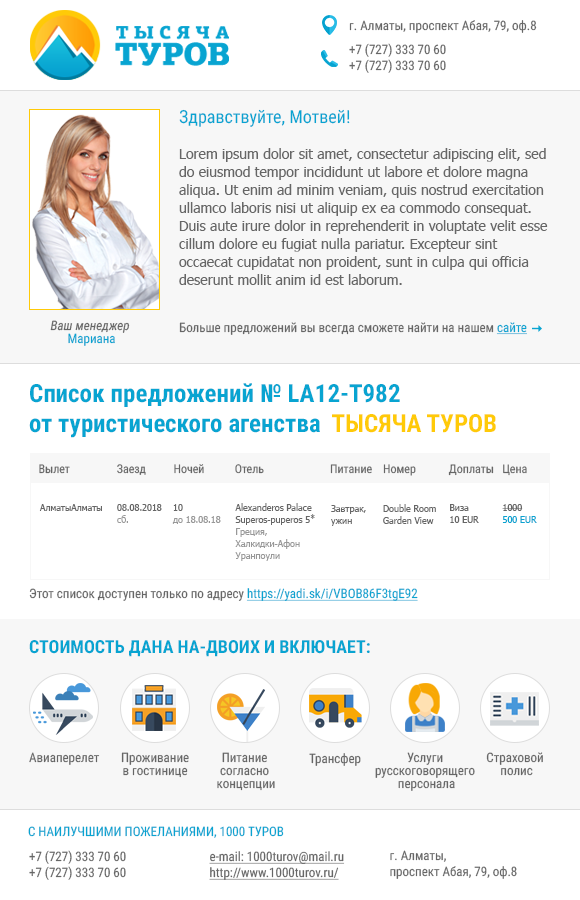
<style>
.page{position:relative;width:580px;height:900px;background:#ffffff}
.page>*{position:absolute;margin:0}
.t1{font:13px/36px "RobotoCondensed-Regular";color:#666666}
.t2{font:13px/24px "RobotoCondensed-Regular";color:#666666}
.t3{font:13px/16px "RobotoCondensed-Regular";color:#666666}
.t4{font:14px/18px "Tahoma";color:#666666}
.t5{font:18px/18px "RobotoCondensed-Regular";color:#08a4d1}
.t6{font:13px/13px "RobotoCondensed-Italic";color:#666666}
.t7{font:13px/13px "RobotoCondensed-Regular";color:#08a4d1}
.t8{font:13px "RobotoCondensed-Regular";color:#666666}
.t9{font:13px "RobotoCondensed-Regular";color:#08a4d1;text-decoration:underline}
.t10{font:25px/30px "RobotoCondensed-Bold";color:#08a4d1}
.t11{font:25px/30px "RobotoCondensed-Bold";color:#ffca08}
.t12{font:12px "RobotoCondensed-Regular";color:#666666}
.t13{font:9px "Tahoma";color:#666666}
.t14{font:9px/12px "Tahoma";color:#666666}
.t15{font:9px/12px "Tahoma";color:#999999}
.t16{font:9px/12px "Tahoma";color:#989898}
.t17{font:9px/12px "Tahoma";color:#08a4d1}
.t18{font:18px "RobotoCondensed-Bold";color:#08a4d1;text-transform:uppercase}
.t19{font:13px/13px "RobotoCondensed-Regular";color:#666666}
.t20{font:13px "RobotoCondensed-Regular";color:#08a4d1;text-transform:uppercase}
.t21{font:13px/16px "RobotoCondensed-Regular";color:#666666;text-decoration:underline}
</style>
<div class="page">
<p class="t1" style="left:349px;top:20px;width:188px;height:53px">г. Алматы, проспект Абая, 79, оф.8<br><span class="t2">+7 (727) 333 70 60<br></span><span class="t3">+7 (727) 333 70 60</span></p>
<p class="t4" style="left:179px;top:109px;width:369px;height:176px"><span class="t5">Здравствуйте, Мотвей!<br><br></span>Lorem ipsum dolor sit amet, consectetur adipiscing elit, sed do eiusmod tempor incididunt ut labore et dolore magna aliqua. Ut enim ad minim veniam, quis nostrud exercitation ullamco laboris nisi ut aliquip ex ea commodo consequat. Duis aute irure dolor in reprehenderit in voluptate velit esse cillum dolore eu fugiat nulla pariatur. Excepteur sint occaecat cupidatat non proident, sunt in culpa qui officia deserunt mollit anim id est laborum.</p>
<p class="t6" style="left:50px;top:320px;width:80px;height:26px;text-align:center">Ваш менеджер <br><span class="t7">Мариана</span></p>
<p class="t8" style="left:179px;top:322px;width:348px;height:13px">Больше предложений вы всегда сможете найти на нашем <span class="t9">сайте</span></p>
<p class="t10" style="left:29px;top:383px;width:467px;height:55px">Список предложений № LA12-T982<br>от туристического агенства  <span class="t11">ТЫСЯЧА ТУРОВ</span></p>
<p class="t12" style="left:39px;top:464px;width:488px;height:12px">Вылет                 Заезд          Ночей           Отель                        Питание    Номер            Доплаты   Цена</p>
<p class="t13" style="left:39px;top:504px;width:63px;height:7px">АлматыАлматы</p>
<p class="t14" style="left:117px;top:504px;width:45px;height:19px">08.08.2018<br><span class="t15">сб.</span></p>
<p class="t16" style="left:172px;top:504px;width:49px;height:20px"><span class="t14">10<br></span>до 18.08.18</p>
<p class="t14" style="left:235px;top:503px;width:80px;height:58px">Alexanderos Palace <br>Superos-puperos 5*<br><span class="t16">Греция, Халкидки-Афон<br>Уранпоули</span></p>
<p class="t14" style="left:331px;top:505px;width:35px;height:21px">Завтрак, <br>ужин</p>
<p class="t14" style="left:383px;top:504px;width:53px;height:20px">Double Room<br>Garden View</p>
<p class="t14" style="left:450px;top:504px;width:29px;height:19px">Виза <br>10 EUR</p>
<p class="t17" style="left:502px;top:504px;width:35px;height:19px"><span class="t14">1000<br></span>500 EUR</p>
<p class="t8" style="left:29px;top:588px;width:389px;height:13px">Этот список доступен только по адресу <span class="t9">https://yadi.sk/i/VBOB86F3tgE92</span></p>
<p class="t18" style="left:29px;top:640px;width:341px;height:17px">Стоимость дана на-двоих и включает:</p>
<p class="t8" style="left:29px;top:752px;width:71px;height:13px">Авиаперелет</p>
<p class="t19" style="left:121px;top:752px;width:68px;height:26px;text-align:center">Проживание<br>в гостинице</p>
<p class="t19" style="left:217px;top:752px;width:58px;height:39px;text-align:center">Питание <br>согласно <br>концепции</p>
<p class="t8" style="left:309px;top:753px;width:52px;height:13px">Трансфер</p>
<p class="t19" style="left:375px;top:752px;width:100px;height:39px;text-align:center">Услуги <br>русскоговорящего <br>персонала</p>
<p class="t19" style="left:486px;top:752px;width:57px;height:24px;text-align:center">Страховой <br>полис</p>
<p class="t20" style="left:28px;top:826px;width:256px;height:12px">С наилучшими пожеланиями, 1000 ТУРОВ</p>
<p class="t3" style="left:29px;top:850px;width:97px;height:30px">+7 (727) 333 70 60<br>+7 (727) 333 70 60</p>
<p class="t21" style="left:209px;top:851px;width:136px;height:29px">e-mail: 1000turov@mail.ru<br>http://www.1000turov.ru/</p>
<p class="t3" style="left:390px;top:850px;width:127px;height:29px">г. Алматы, <br>проспект Абая, 79, оф.8</p>
</div>
